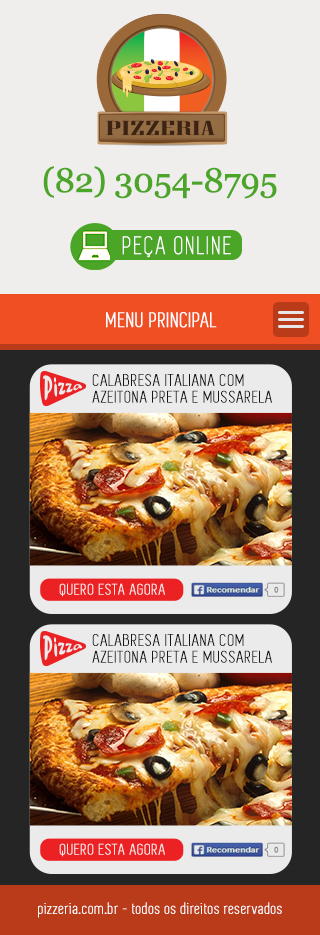
<style>
.page{position:relative;width:320px;height:935px;background:#f0eded}
.page>*{position:absolute;margin:0}
.t1{font:34px "Georgia";letter-spacing:-0.03em;color:#4ba628;font-weight:bold}
.t2{font:26px "Simplifica";letter-spacing:0.06em;color:#ffffff;font-weight:bold}
.t3{font:22px "Simplifica";letter-spacing:0.032em;color:#fefefe;font-weight:bold}
.t4{font:17.3px/16.6px "Simplifica";letter-spacing:0.03em;color:#161616;font-weight:bold;scale:1.08 1}
.t5{font:15.9px "Simplifica";letter-spacing:0.036em;color:#fce6e6;font-weight:bold;scale:1.08 1}
.t6{font:16px "Simplifica";letter-spacing:0.03em;color:#ffffff;font-weight:bold}
</style>
<div class="page">
<p class="t1" style="left:43px;top:166px;width:234px;height:33px">(82) 3054-8795</p>
<p class="t2" style="left:122px;top:236px;width:109px;height:22px">PEÇA ONLINE</p>
<p class="t3" style="left:106px;top:312px;width:111px;height:16px">MENU PRINCIPAL</p>
<p class="t4" style="left:92px;top:374px;width:180px;height:29px">CALABRESA ITALIANA COM <br>AZEITONA PRETA E MUSSARELA</p>
<p class="t5" style="left:59px;top:583px;width:106px;height:14px">QUERO ESTA AGORA</p>
<p class="t4" style="left:92px;top:634px;width:180px;height:29px">CALABRESA ITALIANA COM <br>AZEITONA PRETA E MUSSARELA</p>
<p class="t5" style="left:59px;top:843px;width:106px;height:14px">QUERO ESTA AGORA</p>
<p class="t6" style="left:38px;top:902px;width:244px;height:16px">pizzeria.com.br - todos os direitos reservados</p>
</div>
